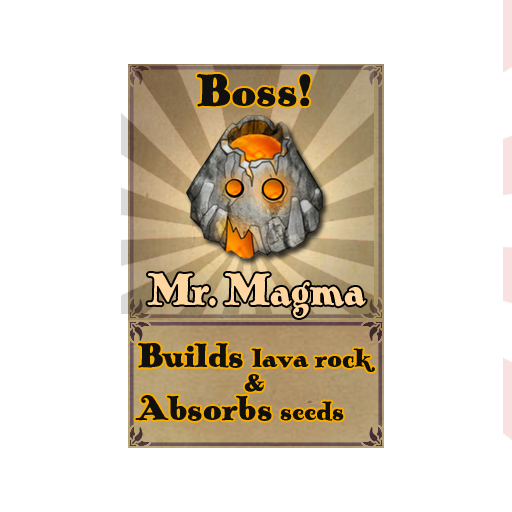
<style>
.page{position:relative;width:512px;height:512px;background:#ffffff}
.page>*{position:absolute;margin:0}
.t1{font:48px "PickworthOldStylePro";color:#101010}
.t2{font:48px "PickworthOldStylePro";color:#ffd6a0;scale:0.83 1}
.t3{font:28px/24px "PickworthOldStylePro";color:#101010}
.t4{font:36px/24px "PickworthOldStylePro";color:#101010}
.t5{font:24px/24px "PickworthOldStylePro";color:#101010}
.t6{font:36px "PickworthOldStylePro";color:#101010}
.t7{font:28px "PickworthOldStylePro";color:#101010}
</style>
<div class="page">
<p class="t1" style="left:197px;top:74px;width:114px;height:33px">Boss!</p>
<p class="t2" style="left:147px;top:273px;width:219px;height:45px">Mr. Magma</p>
<p class="t3" style="left:138px;top:343px;width:237px;height:49px;text-align:center"><span class="t4">Builds </span>lava rock<br><span class="t5">&amp;</span></p>
<p class="t6" style="left:135px;top:395px;width:209px;height:26px"><span class="t7"><br><br></span>Absorbs <span class="t7">seeds</span></p>
</div>
